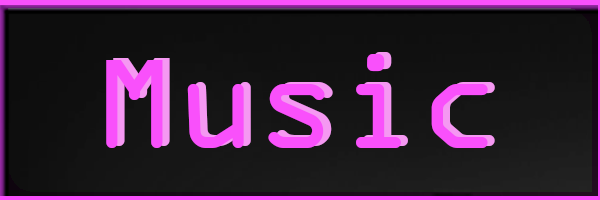
<style>
.page{position:relative;width:600px;height:200px}
.page>*{position:absolute;margin:0}
.t1{font:134.7px "OCRAExtended";color:#f950fb}
.t2{font:134.7px "OCRAExtended"}
</style>
<div class="page">
<p class="t1" style="left:106px;top:54px;width:382px;height:94px">Music</p>
<p class="t2" style="left:113px;top:52px;width:382px;height:94px">Music</p>
</div>
